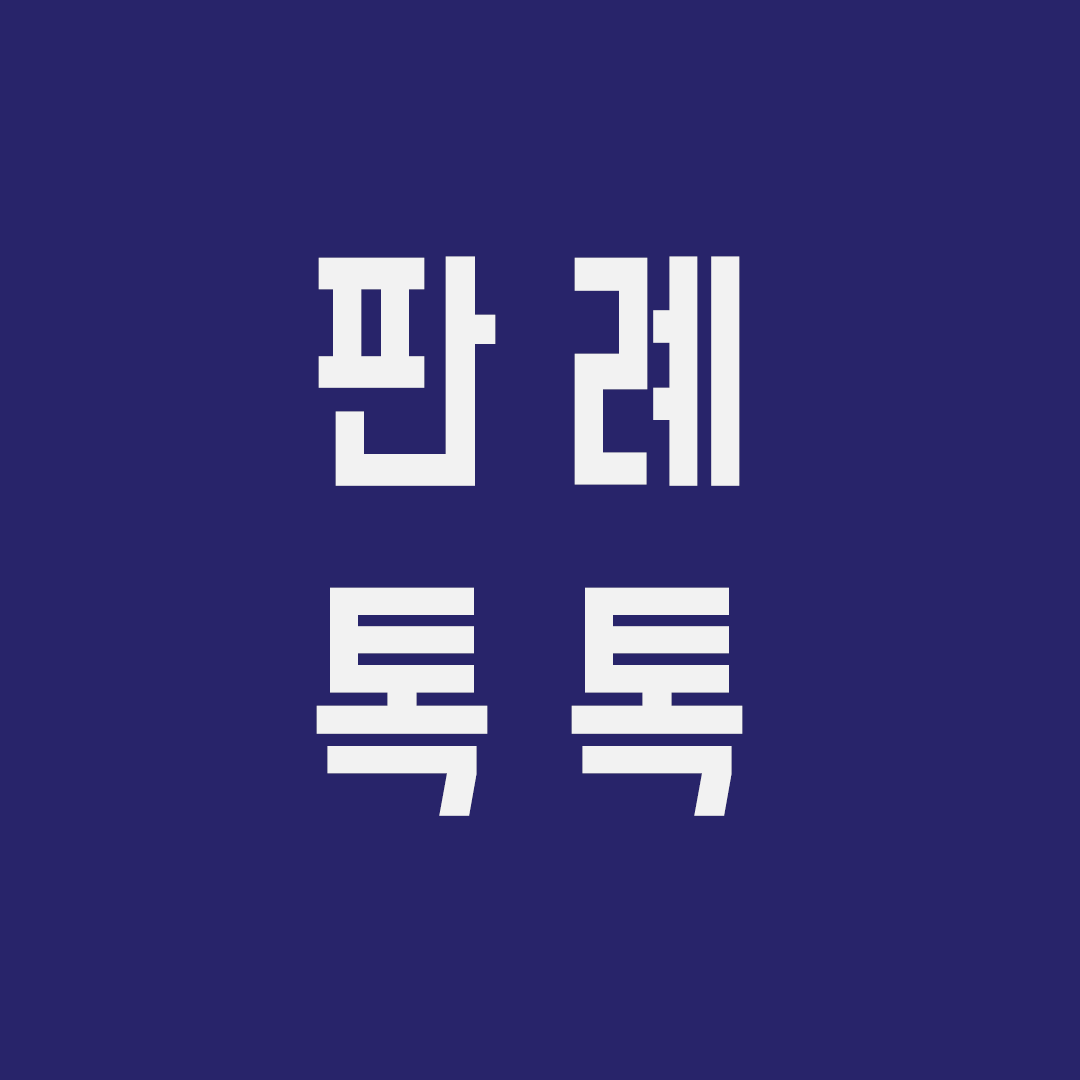
<style>
.page{position:relative;width:1080px;height:1080px;background:#28246a}
.page>*{position:absolute;margin:0}
.t1{font:242px/330px "BMDoHyeon-OTF";letter-spacing:0.33em;color:#f2f2f2;scale:0.82 1}
</style>
<div class="page">
<p class="t1" style="left:316px;top:256px;width:427px;height:560px;text-align:center">판례<br>톡톡</p>
</div>
